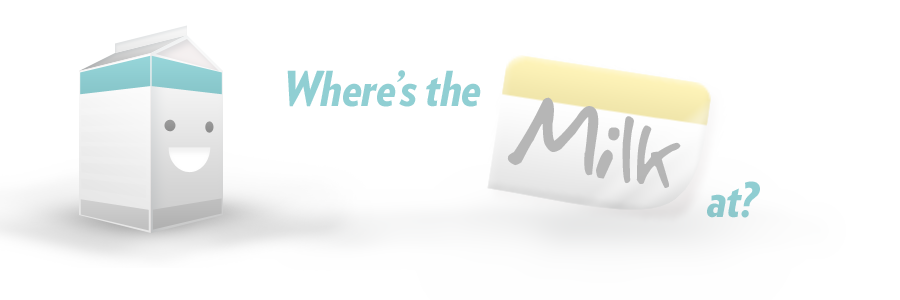
<style>
.page{position:relative;width:900px;height:300px;background:#ffffff}
.page>*{position:absolute;margin:0}
.t1{font:48px "VerlagCondensed-BlackItalic";color:#90cfd3}
.t2{font:92.1px "JoseFernandez";letter-spacing:0.005em;color:#b6b6b6}
</style>
<div class="page">
<p class="t1" style="left:287px;top:70px;width:194px;height:37px">Where’s the</p>
<p class="t2" style="left:507px;top:97px;width:174px;height:91px;rotate:10deg">Milk</p>
<p class="t1" style="left:707px;top:181px;width:53px;height:37px">at?</p>
</div>
